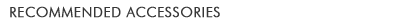
<style>
.page{position:relative;width:400px;height:24px;background:#ffffff}
.page>*{position:absolute;margin:0}
.t1{font:14px "FuturaBT-Light";letter-spacing:0.025em;color:#363636;text-transform:uppercase;font-weight:bold}
</style>
<div class="page">
<p class="t1" style="left:10px;top:6px;width:210px;height:12px">recommended accessories</p>
</div>
